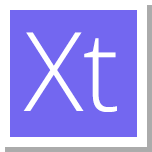
<style>
.page{position:relative;width:152px;height:152px;background:#7367f0}
.page>*{position:absolute;margin:0}
.t1{font:110px "OpenSans-Light";color:#ffffff}
</style>
<div class="page">
<p class="t1" style="left:23px;top:32px;width:94px;height:80px">Xt</p>
</div>
